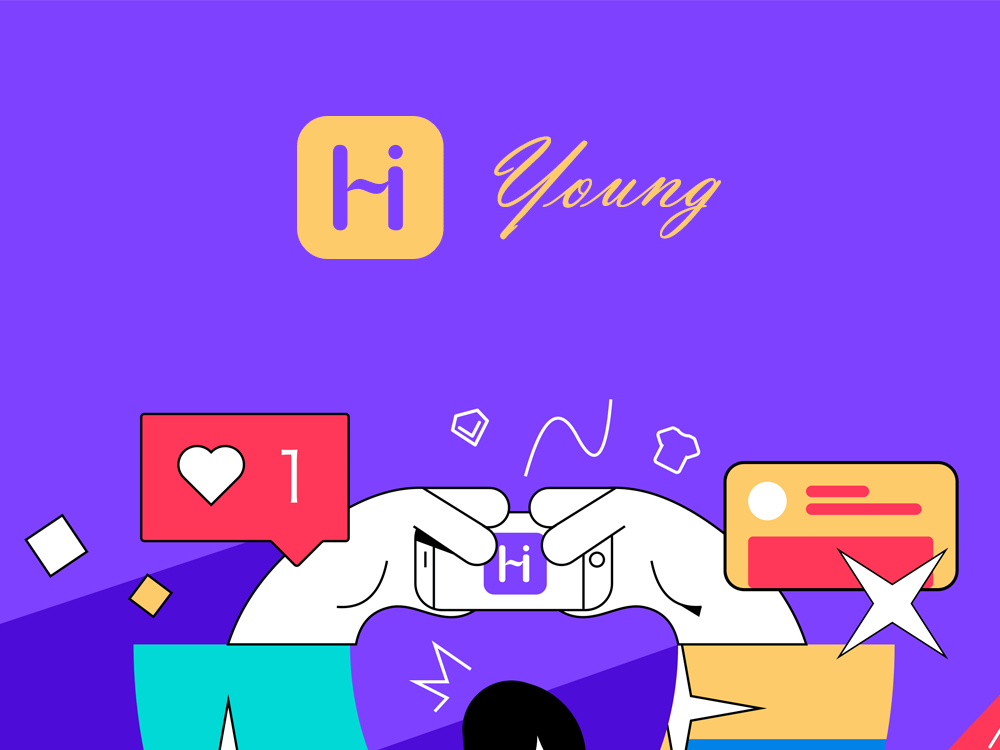
<style>
.page{position:relative;width:1000px;height:750px;background:#7e41ff}
.page>*{position:absolute;margin:0}
.t1{font:105.8px "VladimirScript";color:#fdcb69}
</style>
<div class="page">
<p class="t1" style="left:494px;top:136px;width:227px;height:104px">Young</p>
</div>
